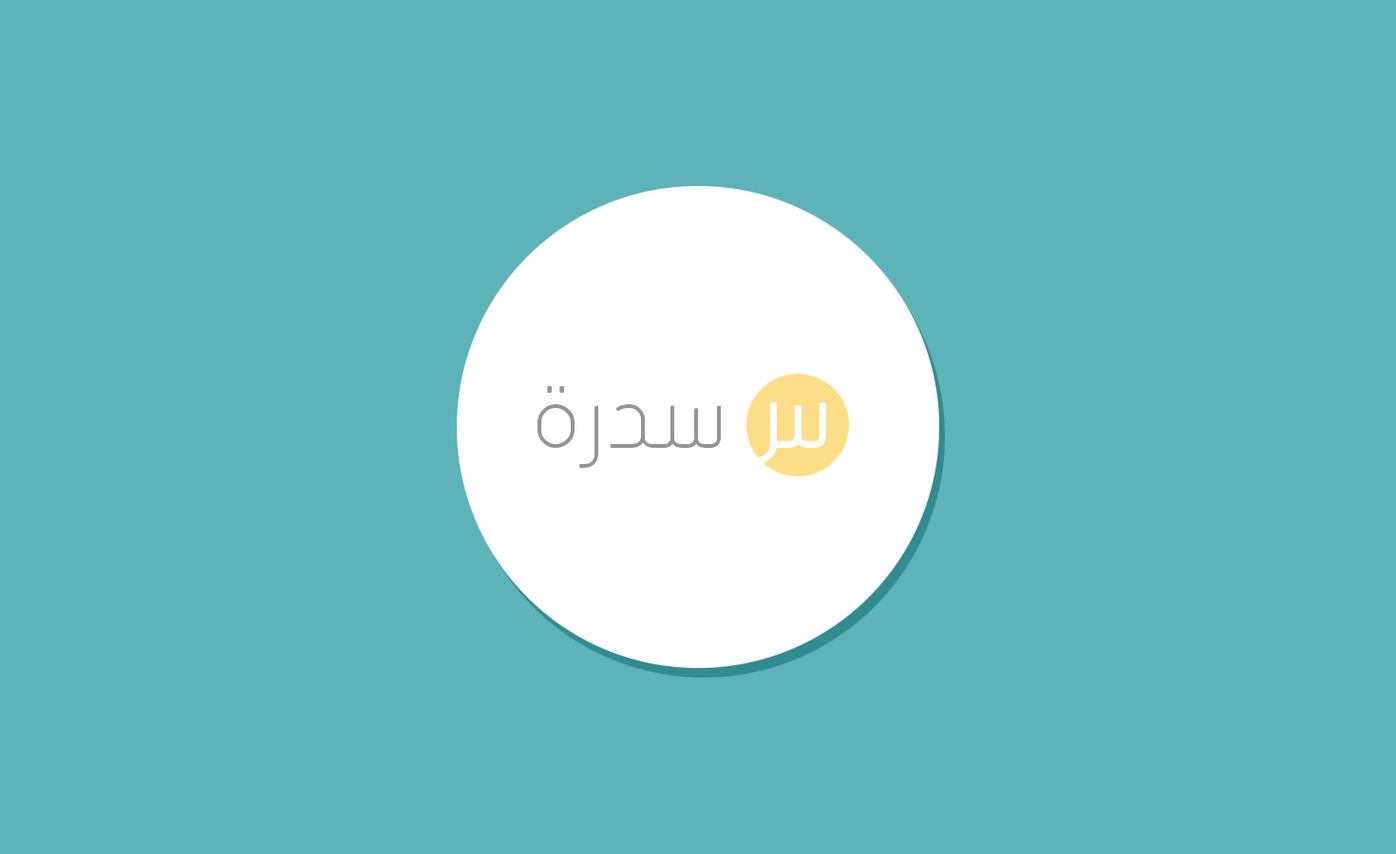
<style>
.page{position:relative;width:1396px;height:854px;background:#5db3b7}
.page>*{position:absolute;margin:0}
.t1{font:94.9px "JFFlat-Light";color:#959595}
.t2{font:94.9px "JFFlat-Regular";color:#ffffff}
</style>
<div class="page">
<p class="t1" style="left:537px;top:385px;width:184px;height:83px">ﺓﺭﺪﺳ</p>
<p class="t2" style="left:736px;top:403px;width:90px;height:62px">س</p>
</div>
